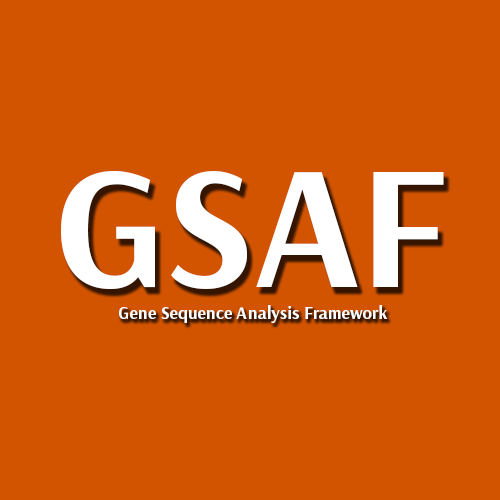
<style>
.page{position:relative;width:500px;height:500px;background:#d35400}
.page>*{position:absolute;margin:0}
.t1{font:176.7px "Arsenal-Bold";color:#ffffff}
.t2{font:17.9px "Arsenal-Bold";color:#ffffff}
</style>
<div class="page">
<p class="t1" style="left:61px;top:171px;width:383px;height:118px">GSAF</p>
<p class="t2" style="left:119px;top:305px;width:269px;height:18px">Gene Sequence Analysis Framework</p>
</div>
